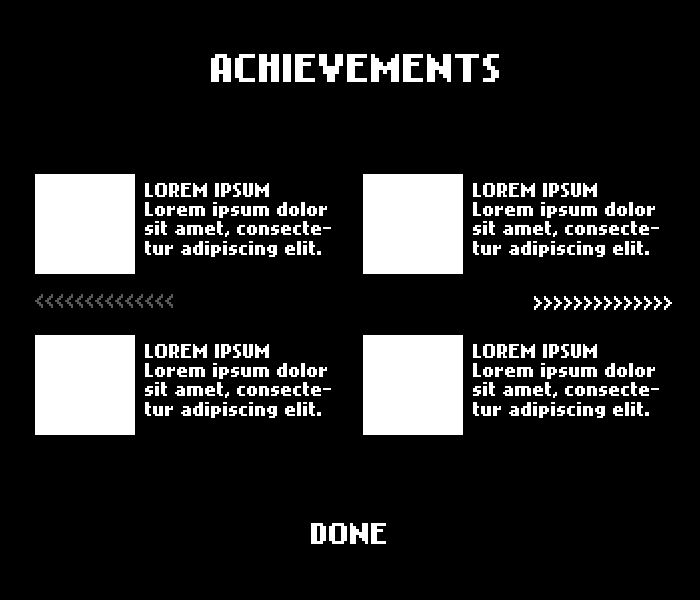
<style>
.page{position:relative;width:700px;height:600px;background:#000000}
.page>*{position:absolute;margin:0}
.t1{font:32px "NokiaCellphoneFC-Small";color:#ffffff}
.t2{font:16px "NokiaCellphoneFC-Small";color:#ffffff}
.t3{font:15.9px "NokiaCellphoneFC-Small";color:#585858}
.t4{font:15.9px "NokiaCellphoneFC-Small";color:#ffffff}
.t5{font:24px "NokiaCellphoneFC-Small";color:#ffffff}
</style>
<div class="page">
<p class="t1" style="left:211px;top:54px;width:288px;height:28px">ACHIEVEMENTS</p>
<p class="t2" style="left:145px;top:183px;width:186px;height:74px">LOREM IPSUM<br>Lorem ipsum dolor sit amet, consectetur adipiscing elit.</p>
<p class="t2" style="left:473px;top:183px;width:186px;height:74px">LOREM IPSUM<br>Lorem ipsum dolor sit amet, consectetur adipiscing elit.</p>
<p class="t3" style="left:35px;top:294px;width:138px;height:14px">&lt;&lt;&lt;&lt;&lt;&lt;&lt;&lt;&lt;&lt;&lt;&lt;&lt;&lt;</p>
<p class="t4" style="left:534px;top:296px;width:138px;height:14px">&gt;&gt;&gt;&gt;&gt;&gt;&gt;&gt;&gt;&gt;&gt;&gt;&gt;&gt;</p>
<p class="t2" style="left:145px;top:344px;width:186px;height:74px">LOREM IPSUM<br>Lorem ipsum dolor sit amet, consectetur adipiscing elit.</p>
<p class="t2" style="left:473px;top:344px;width:186px;height:74px">LOREM IPSUM<br>Lorem ipsum dolor sit amet, consectetur adipiscing elit.</p>
<p class="t5" style="left:311px;top:523px;width:75px;height:21px"><span class="t1"><br></span>DONE</p>
</div>
